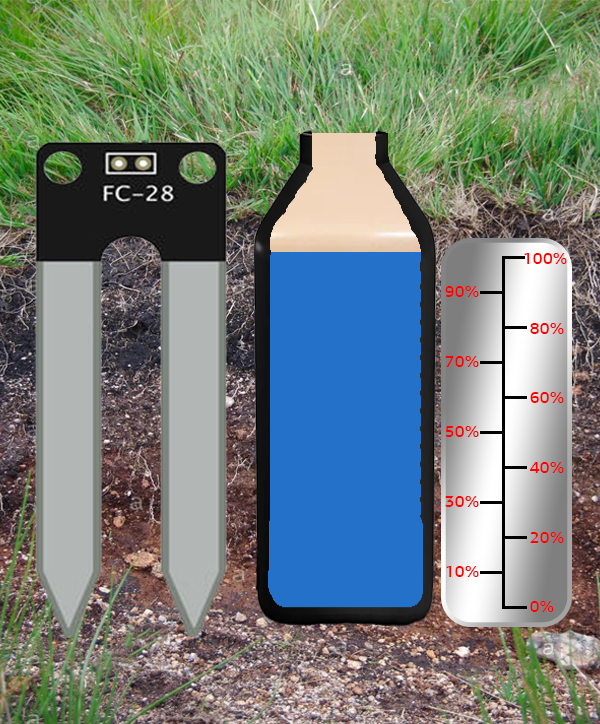
<style>
.page{position:relative;width:600px;height:724px}
.page>*{position:absolute;margin:0}
.t1{font:16.7px "3ds";color:#ff0000}
</style>
<div class="page">
<p class="t1" style="left:524px;top:253px;width:43px;height:11px">100%</p>
<p class="t1" style="left:445px;top:286px;width:34px;height:11px">90%</p>
<p class="t1" style="left:530px;top:323px;width:34px;height:11px">80%</p>
<p class="t1" style="left:445px;top:356px;width:34px;height:11px">70%</p>
<p class="t1" style="left:530px;top:392px;width:34px;height:11px">60%</p>
<p class="t1" style="left:445px;top:426px;width:34px;height:11px">50%</p>
<p class="t1" style="left:529px;top:462px;width:35px;height:11px">40%</p>
<p class="t1" style="left:445px;top:496px;width:34px;height:11px">30%</p>
<p class="t1" style="left:530px;top:532px;width:34px;height:11px">20%</p>
<p class="t1" style="left:446px;top:566px;width:33px;height:11px">10%</p>
<p class="t1" style="left:530px;top:601px;width:24px;height:11px">0%</p>
</div>
